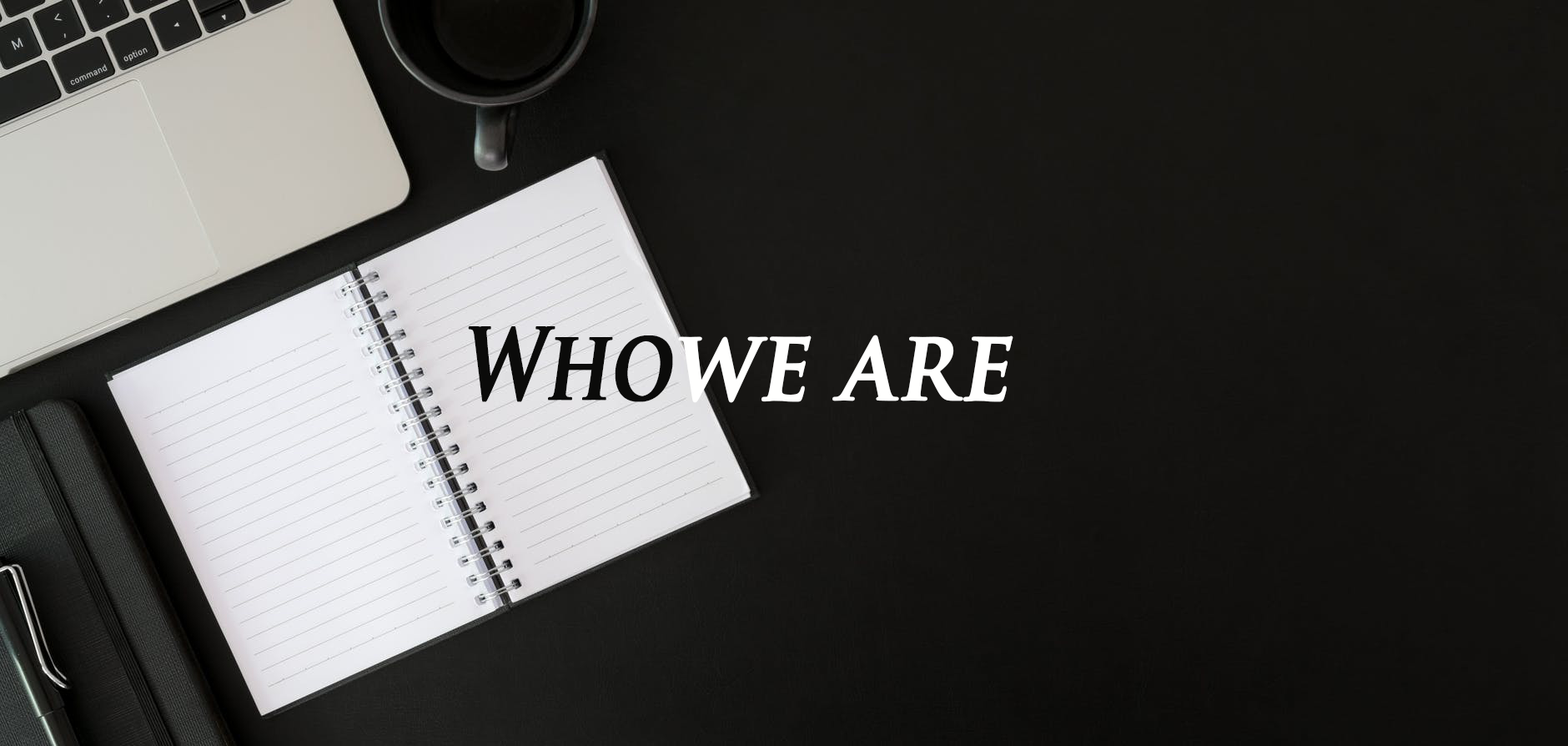
<style>
.page{position:relative;width:1568px;height:746px}
.page>*{position:absolute;margin:0}
.t1{font:96.8px "TrajanPro-Bold";color:#0b0b0a;font-weight:bold;font-style:italic;scale:0.76 1}
.t2{font:96.7px "TrajanPro-Bold";color:#fffffe;font-weight:bold;font-style:italic;scale:0.9 1}
</style>
<div class="page">
<p class="t1" style="left:468px;top:326px;width:205px;height:76px">Who</p>
<p class="t2" style="left:678px;top:334px;width:335px;height:69px">we are</p>
</div>
